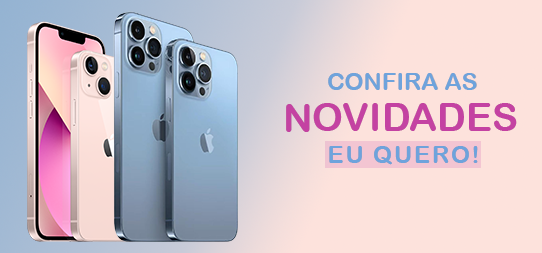
<style>
.page{position:relative;width:542px;height:253px;background:#fde2dc}
.page>*{position:absolute;margin:0}
.t1{font:24px "ArialRoundedMTBold";color:#6ea3dc}
.t2{font:39.1px "ArialRoundedMTBold";color:#c442a2}
.t3{font:24px "ArialRoundedMTBold";letter-spacing:0.075em;color:#6ea3dc}
</style>
<div class="page">
<p class="t1" style="left:328px;top:73px;width:149px;height:17px">CONFIRA AS</p>
<p class="t1" style="left:328px;top:73px;width:149px;height:17px">CONFIRA AS</p>
<p class="t2" style="left:286px;top:103px;width:231px;height:29px">NOVIDADES</p>
<p class="t2" style="left:286px;top:103px;width:231px;height:29px">NOVIDADES</p>
<p class="t3" style="left:329px;top:146px;width:149px;height:19px">EU QUERO!</p>
<p class="t3" style="left:329px;top:146px;width:149px;height:19px">EU QUERO!</p>
</div>
